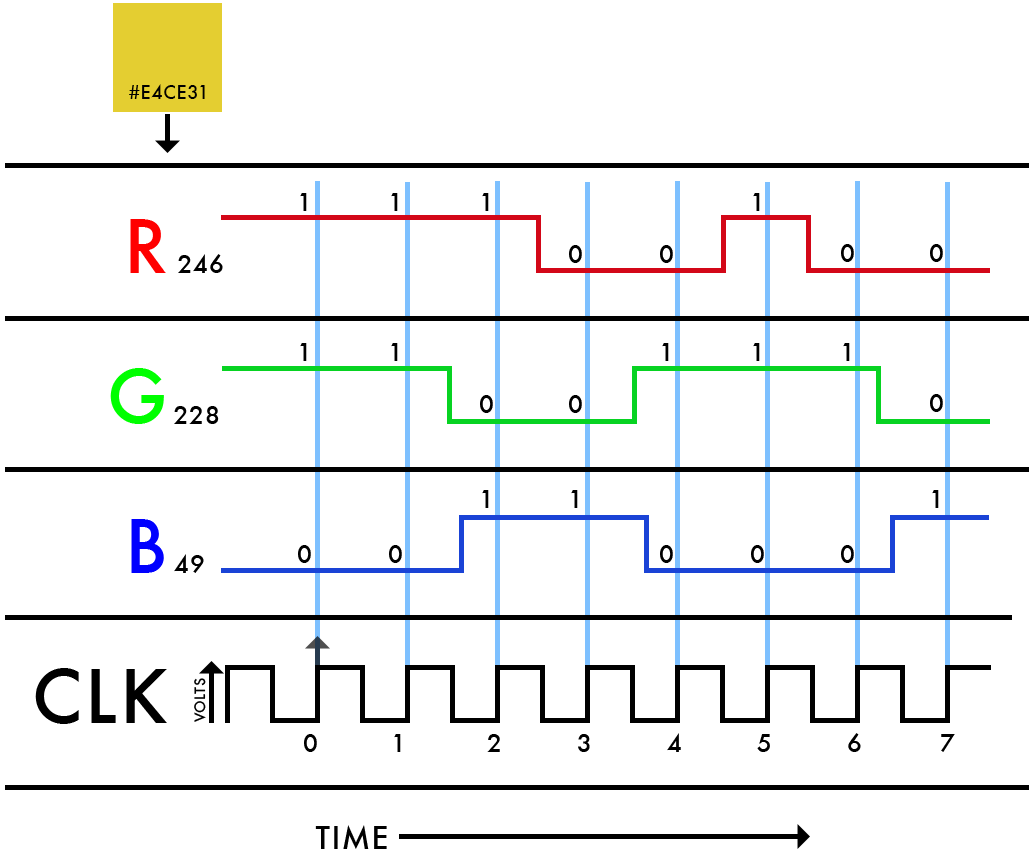
<style>
.page{position:relative;width:1033px;height:862px;background:#ffffff}
.page>*{position:absolute;margin:0}
.t1{font:18px "Futura-Medium";letter-spacing:0.04em;color:#000000}
.t2{font:24px "Futura-Medium";letter-spacing:0.04em;color:#000000}
.t3{font:72px/150px "Futura-Medium";letter-spacing:0.04em;color:#000000}
.t4{font:72px/150px "Futura-Medium";letter-spacing:0.04em;color:#ff0000}
.t5{font:72px/150px "Futura-Medium";letter-spacing:0.04em;color:#00ff00}
.t6{font:72px/150px "Futura-Medium";letter-spacing:0.04em;color:#0000ff}
.t7{font:14px "Futura-Medium";letter-spacing:0.04em;color:#000000}
.t8{font:30px "Futura-Medium";letter-spacing:0.04em;color:#000000}
</style>
<div class="page">
<p class="t1" style="left:129px;top:84px;width:76px;height:15px">#E4CE31</p>
<p class="t2" style="left:300px;top:193px;width:7px;height:18px">1</p>
<p class="t2" style="left:391px;top:193px;width:7px;height:18px">1</p>
<p class="t2" style="left:482px;top:193px;width:7px;height:18px">1</p>
<p class="t2" style="left:753px;top:193px;width:7px;height:18px">1</p>
<p class="t3" style="left:35px;top:219px;width:132px;height:505px;text-align:right"><span class="t4">R<br></span><span class="t5">G<br></span><span class="t6">B<br></span>CLK</p>
<p class="t2" style="left:569px;top:245px;width:13px;height:18px">0</p>
<p class="t2" style="left:660px;top:245px;width:13px;height:18px">0</p>
<p class="t2" style="left:841px;top:244px;width:13px;height:18px">0</p>
<p class="t2" style="left:930px;top:244px;width:13px;height:18px">0</p>
<p class="t2" style="left:178px;top:254px;width:45px;height:19px">246</p>
<p class="t2" style="left:300px;top:343px;width:7px;height:18px">1</p>
<p class="t2" style="left:391px;top:343px;width:7px;height:18px">1</p>
<p class="t2" style="left:662px;top:343px;width:7px;height:18px">1</p>
<p class="t2" style="left:753px;top:343px;width:7px;height:18px">1</p>
<p class="t2" style="left:843px;top:343px;width:7px;height:18px">1</p>
<p class="t2" style="left:480px;top:395px;width:13px;height:18px">0</p>
<p class="t2" style="left:569px;top:395px;width:13px;height:18px">0</p>
<p class="t2" style="left:930px;top:394px;width:13px;height:18px">0</p>
<p class="t2" style="left:174px;top:406px;width:45px;height:18px">228</p>
<p class="t2" style="left:482px;top:490px;width:7px;height:18px">1</p>
<p class="t2" style="left:571px;top:490px;width:7px;height:18px">1</p>
<p class="t2" style="left:932px;top:490px;width:7px;height:18px">1</p>
<p class="t2" style="left:298px;top:545px;width:13px;height:18px">0</p>
<p class="t2" style="left:389px;top:545px;width:13px;height:18px">0</p>
<p class="t2" style="left:660px;top:545px;width:13px;height:18px">0</p>
<p class="t2" style="left:751px;top:545px;width:13px;height:18px">0</p>
<p class="t2" style="left:841px;top:545px;width:13px;height:18px">0</p>
<p class="t2" style="left:174px;top:554px;width:30px;height:19px">49</p>
<p class="t7" style="left:194px;top:678px;width:12px;height:44px;rotate:-90deg">VOLTS</p>
<p class="t2" style="left:304px;top:734px;width:13px;height:18px">0</p>
<p class="t2" style="left:394px;top:734px;width:7px;height:18px">1</p>
<p class="t2" style="left:487px;top:734px;width:13px;height:18px">2</p>
<p class="t2" style="left:578px;top:734px;width:12px;height:18px">3</p>
<p class="t2" style="left:667px;top:733px;width:14px;height:19px">4</p>
<p class="t2" style="left:757px;top:734px;width:13px;height:18px">5</p>
<p class="t2" style="left:848px;top:733px;width:13px;height:19px">6</p>
<p class="t2" style="left:941px;top:734px;width:14px;height:18px">7</p>
<p class="t8" style="left:315px;top:825px;width:72px;height:24px">TIME</p>
</div>
